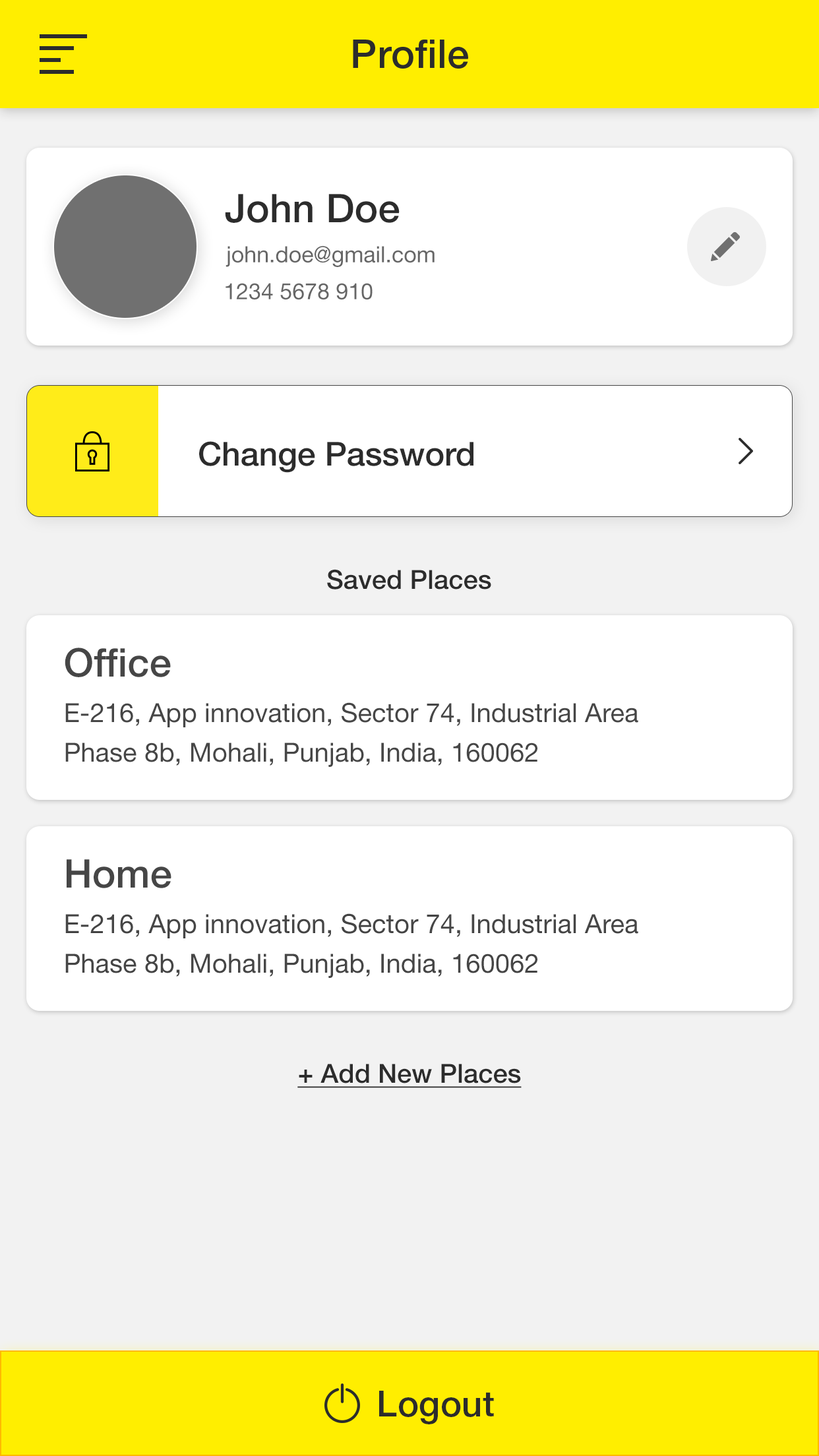
<style>
.page{position:relative;width:819px;height:1456px;background:#ffffff}
.page>*{position:absolute;margin:0}
.t1{font:39.6px "HelveticaNeueLTStd-Md";letter-spacing:0.01em;color:#2c2c2c}
.t2{font:39.6px "HelveticaNeueLTStd-Md";color:#2c2c2c}
.t3{font:22.4px "HelveticaNeueLTStd-Roman";color:#666666}
.t4{font:33px "HelveticaNeueLTStd-Md";color:#2c2c2c}
.t5{font:26.4px "HelveticaNeueLTStd-Md";color:#2c2c2c}
.t6{font:39.6px "HelveticaNeueLTStd-Md";color:#464646}
.t7{font:26.4px/39.6px "HelveticaNeueLTStd-Roman";color:#464646}
.t8{font:26.4px "HelveticaNeueLTStd-Md";color:#2c2c2c;text-decoration:underline}
.t9{font:35.6px "HelveticaNeueLTStd-Md";letter-spacing:0.01em;color:#2c2c2c}
</style>
<div class="page">
<p class="t1" style="left:353px;top:40px;width:115px;height:29px">Profile</p>
<p class="t2" style="left:225px;top:194px;width:175px;height:29px">John Doe</p>
<p class="t3" style="left:226px;top:246px;width:209px;height:21px">john.doe@gmail.com</p>
<p class="t3" style="left:226px;top:283px;width:147px;height:17px">1234 5678 910</p>
<p class="t4" style="left:199px;top:441px;width:274px;height:32px">Change Password</p>
<p class="t5" style="left:327px;top:569px;width:164px;height:21px">Saved Places</p>
<p class="t6" style="left:65px;top:648px;width:106px;height:29px">Office</p>
<p class="t7" style="left:65px;top:702px;width:573px;height:65px">E-216, App innovation, Sector 74, Industrial Area<br>Phase 8b, Mohali, Punjab, India, 160062</p>
<p class="t6" style="left:67px;top:859px;width:104px;height:29px">Home</p>
<p class="t7" style="left:65px;top:913px;width:573px;height:65px">E-216, App innovation, Sector 74, Industrial Area<br>Phase 8b, Mohali, Punjab, India, 160062</p>
<p class="t8" style="left:297px;top:1064px;width:225px;height:24px">+ Add New Places</p>
<p class="t9" style="left:379px;top:1391px;width:115px;height:33px">Logout</p>
</div>
